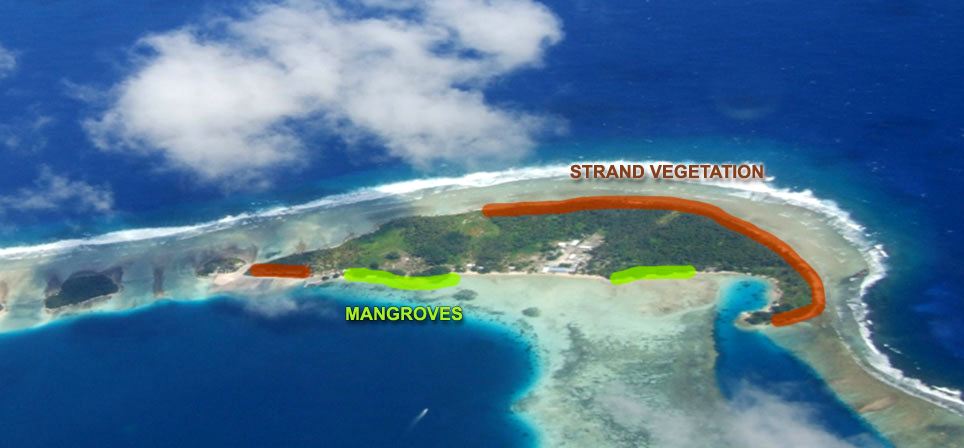
<style>
.page{position:relative;width:964px;height:448px}
.page>*{position:absolute;margin:0}
.t1{font:18px "Arial-BoldMT";color:#823f1e}
.t2{font:18px "Arial-BoldMT";color:#a7ef2a}
</style>
<div class="page">
<p class="t1" style="left:570px;top:164px;width:193px;height:15px">STRAND VEGETATION</p>
<p class="t2" style="left:346px;top:306px;width:117px;height:15px">MANGROVES</p>
</div>
